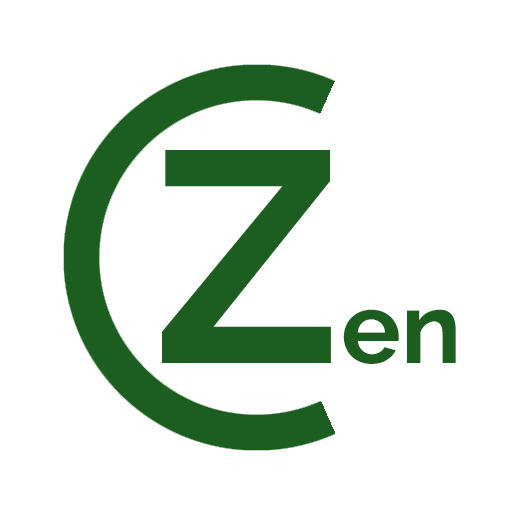
<style>
.page{position:relative;width:512px;height:512px;background:#ffffff}
.page>*{position:absolute;margin:0}
.t1{font:100px "Raleway-Bold";color:#1b5e20}
.t2{font:300px "Raleway-Bold";color:#1b5e20}
</style>
<div class="page">
<p class="t1" style="left:162px;top:150px;width:294px;height:214px"><span class="t2">Z</span>en</p>
</div>
